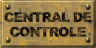
<style>
.page{position:relative;width:96px;height:48px}
.page>*{position:absolute;margin:0}
.t1{font:13.3px/14.7px "Arial-Black";letter-spacing:-0.055em;text-transform:uppercase}
</style>
<div class="page">
<p class="t1" style="left:4px;top:12px;width:88px;height:25px;text-align:center">CENTRAL DE<br>CONTROLE</p>
</div>
